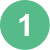
<style>
.page{position:relative;width:50px;height:50px;background:#56bb89}
.page>*{position:absolute;margin:0}
.t1{font:30px "Arial-BoldMT";color:#ffffff}
</style>
<div class="page">
<p class="t1" style="left:19px;top:14px;width:10px;height:22px">1</p>
</div>
